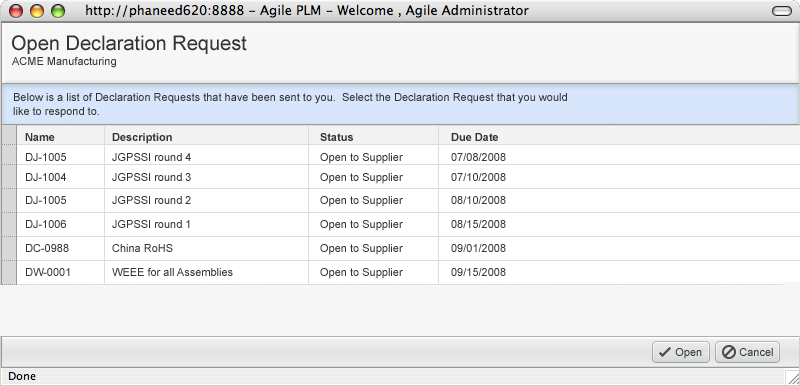
<style>
.page{position:relative;width:800px;height:386px;background:#ffffff}
.page>*{position:absolute;margin:0}
.t1{font:20px "ArialMT";color:#333333}
.t2{font:11px "ArialMT";color:#333333}
.t3{font:11px/14px "ArialMT";color:#333333}
.t4{font:11px/24px "ArialMT";color:#333333}
.t5{font:11px/20px "Arial-BoldMT";color:#333333}
.t6{font:11px/20px "ArialMT";color:#333333}
.t7{font:11px/23px "ArialMT";color:#333333}
</style>
<div class="page">
<p class="t1" style="left:12px;top:35px;width:235px;height:19px">Open Declaration Request</p>
<p class="t2" style="left:12px;top:57px;width:104px;height:11px">ACME Manufacturing</p>
<p class="t3" style="left:13px;top:93px;width:554px;height:25px">Below is a list of Declaration Requests that have been sent to you.  Select the Declaration Request that you would<br>like to respond to.</p>
<p class="t4" style="left:25px;top:133px;width:45px;height:143px"><span class="t5">Name<br></span><span class="t6">DJ-1005<br>DJ-1004<br></span><span class="t7">DJ-1005<br></span>DJ-1006<br>DC-0988<br>DW-0001</p>
<p class="t4" style="left:112px;top:133px;width:121px;height:143px"><span class="t5">Description<br></span><span class="t6">JGPSSI round 4<br>JGPSSI round 3<br></span><span class="t7">JGPSSI round 2<br></span>JGPSSI round 1<br>China RoHS<br>WEEE for all Assemblies</p>
<p class="t4" style="left:320px;top:133px;width:83px;height:146px"><span class="t5">Status<br></span><span class="t6">Open to Supplier<br>Open to Supplier<br></span><span class="t7">Open to Supplier<br></span>Open to Supplier<br>Open to Supplier<br>Open to Supplier</p>
<p class="t4" style="left:451px;top:133px;width:55px;height:143px"><span class="t5">Due Date<br></span><span class="t6">07/08/2008<br>07/10/2008<br></span><span class="t7">08/10/2008<br></span>08/15/2008<br>09/01/2008<br>09/15/2008</p>
<p class="t2" style="left:675px;top:348px;width:27px;height:11px">Open</p>
<p class="t2" style="left:739px;top:348px;width:34px;height:8px">Cancel</p>
</div>
